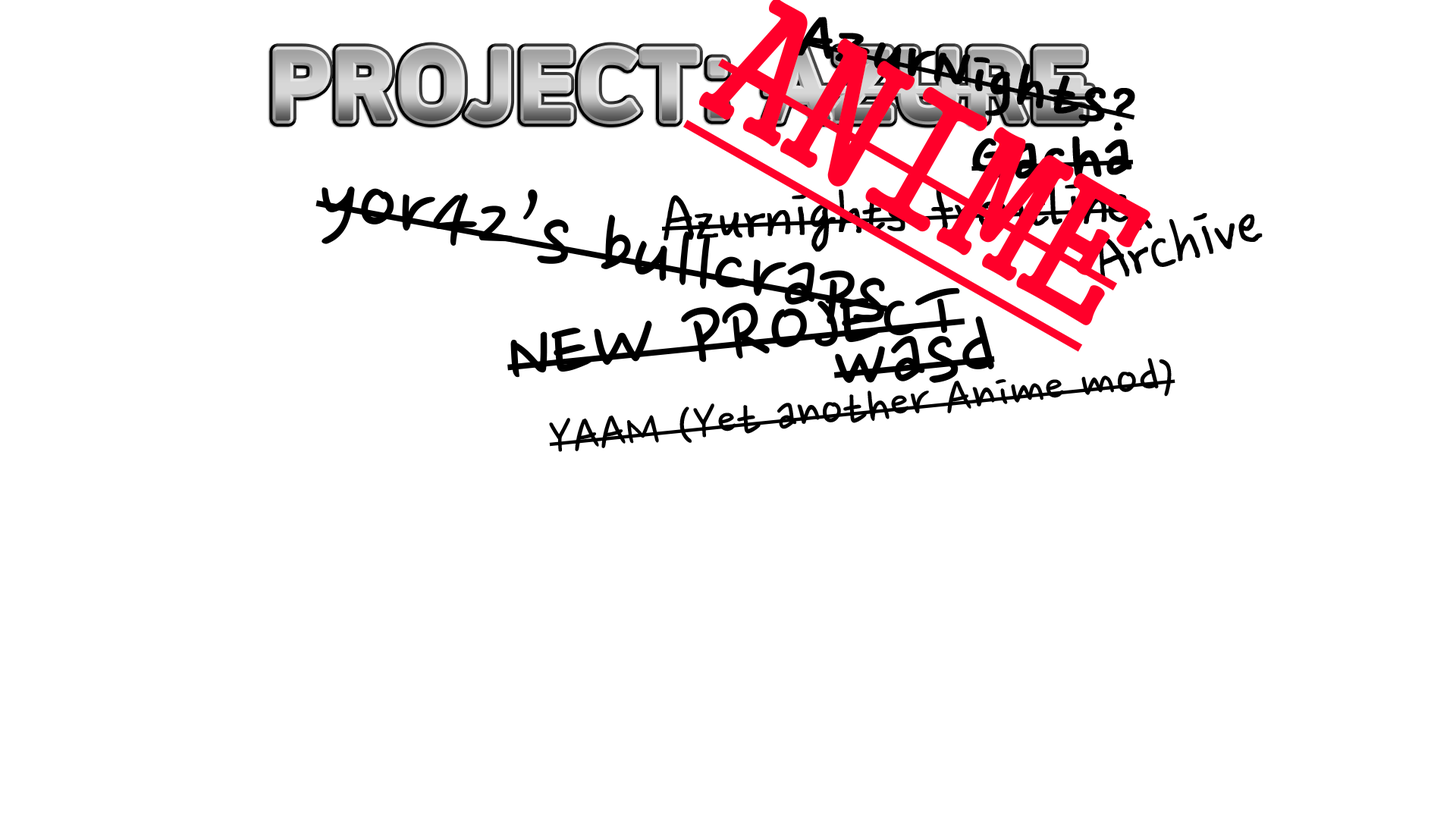
<style>
.page{position:relative;width:1456px;height:819px;background:#ffffff}
.page>*{position:absolute;margin:0}
.t1{font:181.8px "GungsuhChe";color:#ff002a;text-decoration:underline}
.t2{font:75.8px "NanumPen";color:#000000;font-weight:bold}
.t3{font:99px "NanumPen";color:#000000}
.t4{font:75.8px "NanumGomSinCe";color:#000000;font-weight:bold}
.t5{font:75.8px "NanumGomSinCe";font-weight:bold}
.t6{font:56.9px "NanumPen";color:#000000}
</style>
<div class="page">
<p class="t1" style="left:683px;top:0px;width:467px;height:352px;rotate:30deg">ANIME</p>
<p class="t2" style="left:797px;top:17px;width:338px;height:114px;rotate:13deg">AzurNights?</p>
<p class="t2" style="left:971px;top:136px;width:163px;height:43px;rotate:-2deg">Gacha</p>
<p class="t3" style="left:315px;top:186px;width:572px;height:138px;rotate:10deg">yor42’s bullcraps</p>
<p class="t4" style="left:661px;top:184px;width:470px;height:68px;rotate:-2deg">Azurnights frontline</p>
<p class="t4" style="left:1099px;top:213px;width:164px;height:70px;rotate:-15deg">Archive</p>
<p class="t5" style="left:1137px;top:215px;width:16px;height:16px;rotate:-15deg">^</p>
<p class="t3" style="left:507px;top:287px;width:458px;height:91px;rotate:-6deg">NEW PROJECT</p>
<p class="t3" style="left:833px;top:316px;width:162px;height:67px;rotate:-6deg">wasd</p>
<p class="t6" style="left:549px;top:358px;width:626px;height:94px;rotate:-6deg">YAAM (Yet another Anime mod)</p>
</div>
